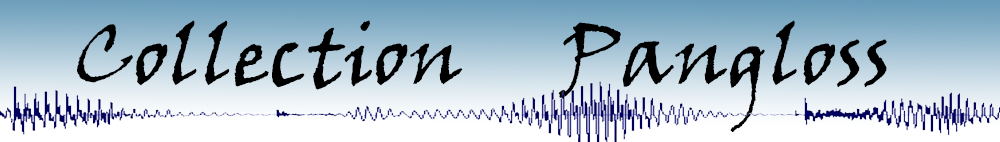
<style>
.page{position:relative;width:1000px;height:142px}
.page>*{position:absolute;margin:0}
.t1{font:83.3px "VinerHandITC";color:#000000}
</style>
<div class="page">
<p class="t1" style="left:77px;top:20px;width:810px;height:113px">Collection     Pangloss</p>
</div>
